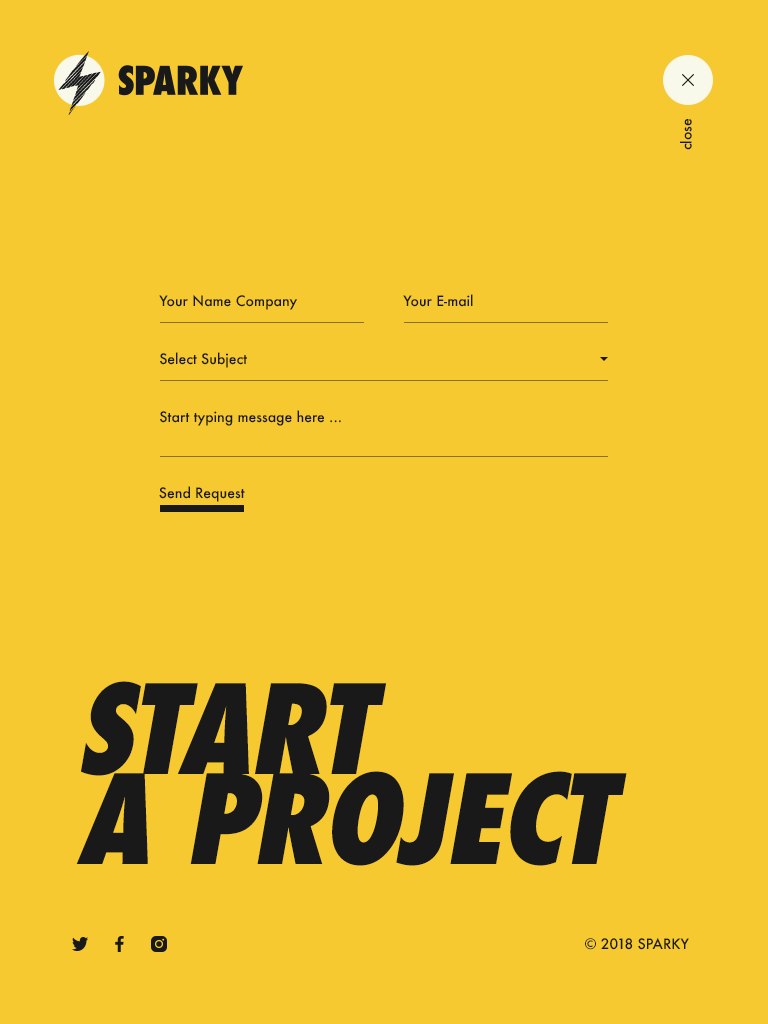
<style>
.page{position:relative;width:768px;height:1024px;background:#f6c930}
.page>*{position:absolute;margin:0}
.t1{font:14px "Futura-Medium";color:#191919}
.t2{font:120px/90px "Futura-CondensedExtraBold";color:#191919;text-transform:uppercase;font-style:italic}
</style>
<div class="page">
<p class="t1" style="left:680px;top:119px;width:12px;height:31px;rotate:-90deg">close</p>
<p class="t1" style="left:159px;top:294px;width:138px;height:16px">Your Name Company</p>
<p class="t1" style="left:403px;top:294px;width:70px;height:13px">Your E-mail</p>
<p class="t1" style="left:160px;top:352px;width:87px;height:16px">Select Subject</p>
<p class="t1" style="left:160px;top:410px;width:181px;height:16px">Start typing message here ...</p>
<p class="t1" style="left:159px;top:486px;width:86px;height:16px">Send Request</p>
<p class="t2" style="left:76px;top:681px;width:551px;height:185px">start <br>a project</p>
<p class="t1" style="left:585px;top:938px;width:104px;height:12px">© 2018 SPARKY</p>
</div>
